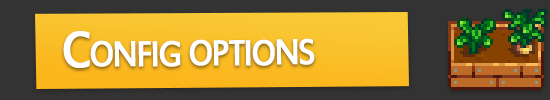
<style>
.page{position:relative;width:550px;height:100px;background:#333333}
.page>*{position:absolute;margin:0}
.t1{font:56px "EstrangeloEdessa";letter-spacing:-0.075em;color:#ffffff;font-variant:small-caps;font-weight:bold;scale:0.9 1}
</style>
<div class="page">
<p class="t1" style="left:63px;top:31px;width:252px;height:37px;rotate:-1deg">Config options</p>
</div>
